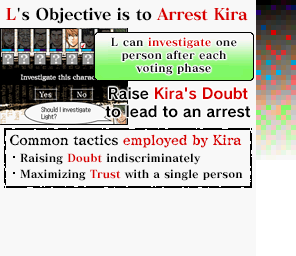
<style>
.page{position:relative;width:296px;height:256px;background:#f8f8f8}
.page>*{position:absolute;margin:0}
.t1{font:16px "MatissePro-EB";letter-spacing:-0.025em;color:#000000}
.t2{font:16px "MatissePro-EB";letter-spacing:-0.025em;color:#d80000}
.t3{font:11px/13px "MatissePro-EB";letter-spacing:0.01em;color:#101010}
.t4{font:11px/13px "MatissePro-EB";letter-spacing:0.01em;color:#d80000}
.t5{font:15px/18px "RodinNTLGPro-B";letter-spacing:-0.01em;color:#000000}
.t6{font:15px/18px "RodinNTLGPro-B";letter-spacing:-0.01em;color:#d80000}
.t7{font:14px "ComicMysteryStd-DB";letter-spacing:-0.01em;color:#d80000}
.t8{font:14px "ComicMysteryStd-DB";letter-spacing:-0.01em;color:#000000}
.t9{font:11px/16px "MatissePro-EB";color:#000000}
.t10{font:11px/16px "MatissePro-EB";color:#d80000}
</style>
<div class="page">
<p class="t1" style="left:6px;top:7px;width:242px;height:17px"><span class="t2">L</span>'s Objective is to <span class="t2">Arrest Kira</span></p>
<p class="t3" style="left:111px;top:37px;width:126px;height:38px;text-align:center">L can <span class="t4">investigate</span> one<br>person after each<br>voting phase</p>
<p class="t5" style="left:105px;top:87px;width:146px;height:31px;text-align:center">Raise <span class="t6">Kira's Doubt<br></span>to lead to an arrest</p>
<p class="t7" style="left:9px;top:134px;width:233px;height:14px"><span class="t8">Common tactics </span>employed by Kira</p>
<p class="t9" style="left:20px;top:153px;width:223px;height:28px">Raising <span class="t10">Doubt</span> indiscriminately<br>Maximizing <span class="t10">Trust</span> with a single person</p>
</div>
